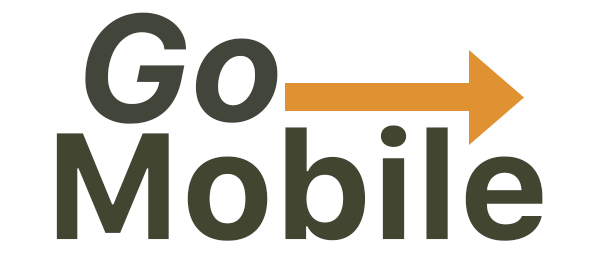
<style>
.page{position:relative;width:600px;height:254px;background:#ffffff}
.page>*{position:absolute;margin:0}
.t1{font:150px "Galvji-BoldOblique";color:#424539}
.t2{font:150px "Galvji-Bold";color:#424530}
</style>
<div class="page">
<p class="t1" style="left:85px;top:12px;width:193px;height:112px">Go</p>
<p class="t2" style="left:56px;top:125px;width:487px;height:116px">Mobile</p>
</div>
